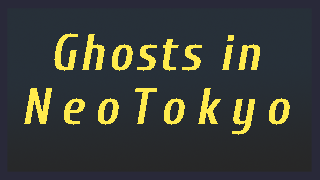
<style>
.page{position:relative;width:320px;height:180px}
.page>*{position:absolute;margin:0}
.t1{font:50px/54.2px "Cuprum-BoldItalic";letter-spacing:0.06em;color:#ffeb4d}
.t2{font:50px/54.2px "Cuprum-BoldItalic";letter-spacing:0.22em;color:#ffeb4d}
</style>
<div class="page">
<p class="t1" style="left:24px;top:33px;width:266px;height:102px;text-align:center">Ghosts in<br><span class="t2">NeoTokyo</span></p>
</div>
